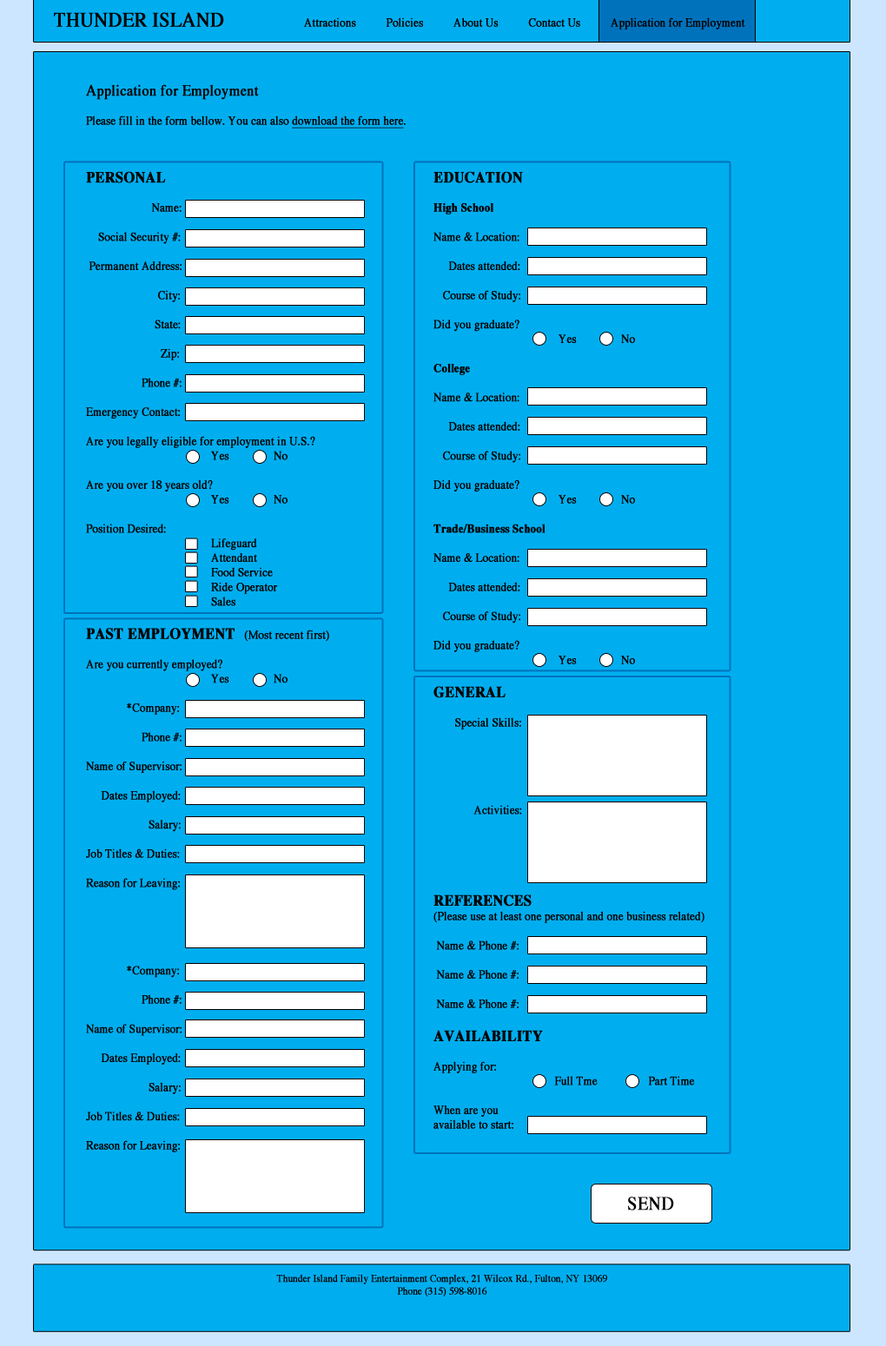
<style>
.page{position:relative;width:886px;height:1346px;background:#00aeef}
.page>*{position:absolute;margin:0}
.t1{font:12.2px "Times-Roman";color:#000000;font-weight:bold;scale:0.9 1}
.t2{font:20.8px "Times-Roman";color:#000000;font-weight:bold;scale:0.9 1}
.t3{font:15.6px "Times-Roman";color:#000000;font-weight:bold;scale:0.9 1}
.t4{font:12.2px "Times-Roman";color:#000000;font-weight:bold;text-decoration:underline;scale:0.9 1}
.t5{font:15.6px "Times-Bold";color:#000000;font-weight:bold;scale:0.9 1}
.t6{font:12.2px "Times-Bold";color:#000000;font-weight:bold;scale:0.9 1}
.t7{font:19.1px "Times-Roman";color:#000000;font-weight:bold;scale:0.9 1}
.t8{font:10.4px "Times-Roman";color:#000000;font-weight:bold;scale:0.9 1}
</style>
<div class="page">
<p class="t1" style="left:54px;top:12px;width:691px;height:18px"><span class="t2">THUNDER ISLAND   </span>Attractions          Policies          About Us          Contact Us          Application for Employment</p>
<p class="t1" style="left:85px;top:84px;width:321px;height:45px"><span class="t3">Application for Employment<br></span><br>Please fill in the form bellow. You can also <span class="t4">download the form here</span>.</p>
<p class="t1" style="left:86px;top:171px;width:243px;height:981px"><span class="t5">PERSONAL<br></span><br>   Name:<br><br>    Social Security #:<br><br> Permanent Address:<br><br>     City:<br><br>    State:<br><br>      Zip:<br><br>         Phone #:<br><br>Emergency Contact:<br><br>Are you legally eligible for employment in U.S.?<br>    Yes  No<br><br>Are you over 18 years old?<br>    Yes  No<br><br>Position Desired:<br>    Lifeguard<br>    Attendant<br>    Food Service <br>    Ride Operator<br>    Sales<br><br><span class="t5">PAST EMPLOYMENT</span>   (Most recent first)<br><br>Are you currently employed?<br>    Yes  No<br><br>    *Company:<br><br>         Phone #:<br><br>Name of Supervisor:<br><br>     Dates Employed:<br><br>  Salary:<br><br>Job Titles &amp; Duties:<br><br>Reason for Leaving:<br><br><br><br><br><br>    *Company:<br><br>         Phone #:<br><br>Name of Supervisor:<br><br>     Dates Employed:<br><br>  Salary:<br><br>Job Titles &amp; Duties:<br><br>Reason for Leaving:</p>
<p class="t1" style="left:433px;top:171px;width:271px;height:958px"><span class="t5">EDUCATION<br><br></span><span class="t6">High School<br><br></span>Name &amp; Location:<br><br>     Dates attended:<br><br>   Course of Study:<br><br>Did you graduate?<br>    Yes  No<br><br><span class="t6">College<br><br></span>Name &amp; Location:<br><br>     Dates attended:<br><br>   Course of Study:<br><br>Did you graduate?<br>    Yes  No<br><br><span class="t6">Trade/Business School<br><br></span>Name &amp; Location:<br><br>     Dates attended:<br><br>   Course of Study:<br><br>Did you graduate?<br>    Yes  No<br><br><span class="t5">GENERAL<br><br></span>       Special Skills:<br><br><br><br><br><br>    Activities:<br><br><br><br><br><br><span class="t5">REFERENCES<br></span>(Please use at least one personal and one business related)<br><br> Name &amp; Phone #:<br><br> Name &amp; Phone #:<br><br> Name &amp; Phone #:<br><br><span class="t5">AVAILABILITY<br></span><br>Applying for: <br>            Full Tme          Part Time<br><br>When are you <br>available to start:</p>
<p class="t7" style="left:628px;top:1197px;width:46px;height:14px">SEND</p>
<p class="t8" style="left:276px;top:1274px;width:331px;height:23px;text-align:center">Thunder Island Family Entertainment Complex, 21 Wilcox Rd., Fulton, NY 13069<br>Phone (315) 598-8016</p>
</div>
